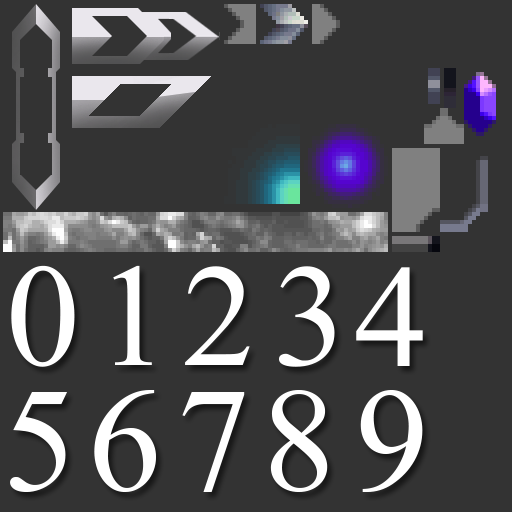
<style>
.page{position:relative;width:512px;height:512px;background:#333333}
.page>*{position:absolute;margin:0}
.t1{font:219.3px "Microsoft-Himalaya";color:#ffffff}
.t2{font:218.7px "Microsoft-Himalaya";color:#ffffff}
.t3{font:218.5px "Microsoft-Himalaya";color:#ffffff}
.t4{font:218.2px "Microsoft-Himalaya";color:#ffffff}
.t5{font:217.6px "Microsoft-Himalaya";color:#ffffff}
.t6{font:220px "Microsoft-Himalaya";color:#ffffff}
</style>
<div class="page">
<p class="t1" style="left:11px;top:265px;width:64px;height:102px">0</p>
<p class="t2" style="left:113px;top:265px;width:39px;height:100px">1</p>
<p class="t3" style="left:185px;top:266px;width:65px;height:99px">2</p>
<p class="t4" style="left:279px;top:266px;width:56px;height:101px">3</p>
<p class="t5" style="left:356px;top:267px;width:67px;height:99px">4</p>
<p class="t6" style="left:94px;top:390px;width:62px;height:102px">6</p>
<p class="t6" style="left:270px;top:390px;width:58px;height:102px">8</p>
<p class="t6" style="left:360px;top:390px;width:63px;height:102px">9</p>
<p class="t6" style="left:10px;top:392px;width:58px;height:100px">5</p>
<p class="t6" style="left:182px;top:392px;width:63px;height:100px">7</p>
</div>
